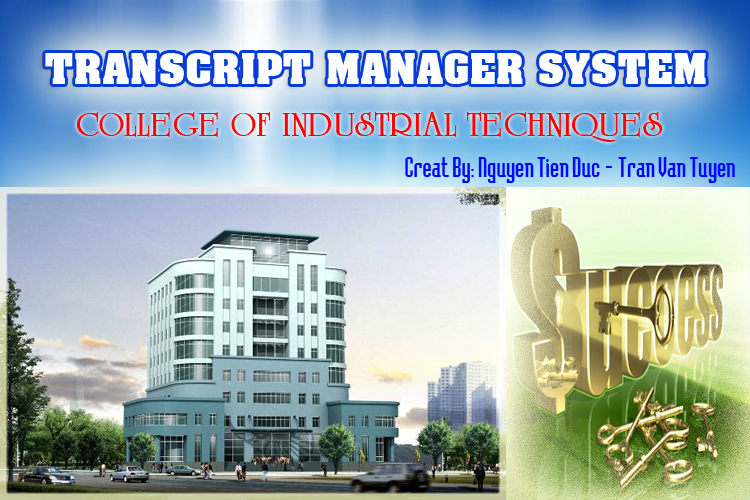
<style>
.page{position:relative;width:750px;height:500px}
.page>*{position:absolute;margin:0}
.t1{font:48px "VNI-Awchon-Bold";color:#ffffff}
.t2{font:36px "VNT-UniversityRomanBold";color:#ff0000}
.t3{font:26px "NVTBedrockNormal";color:#0006ff}
</style>
<div class="page">
<p class="t1" style="left:45px;top:53px;width:661px;height:31px">TRANSCRIPT MANAGER SYSTEM</p>
<p class="t2" style="left:76px;top:112px;width:587px;height:30px">COLLEGE OF INDUSTRIAL TECHNIQUES</p>
<p class="t3" style="left:405px;top:157px;width:330px;height:26px">Creat By: Nguyen Tien Duc - Tran Van Tuyen</p>
</div>
